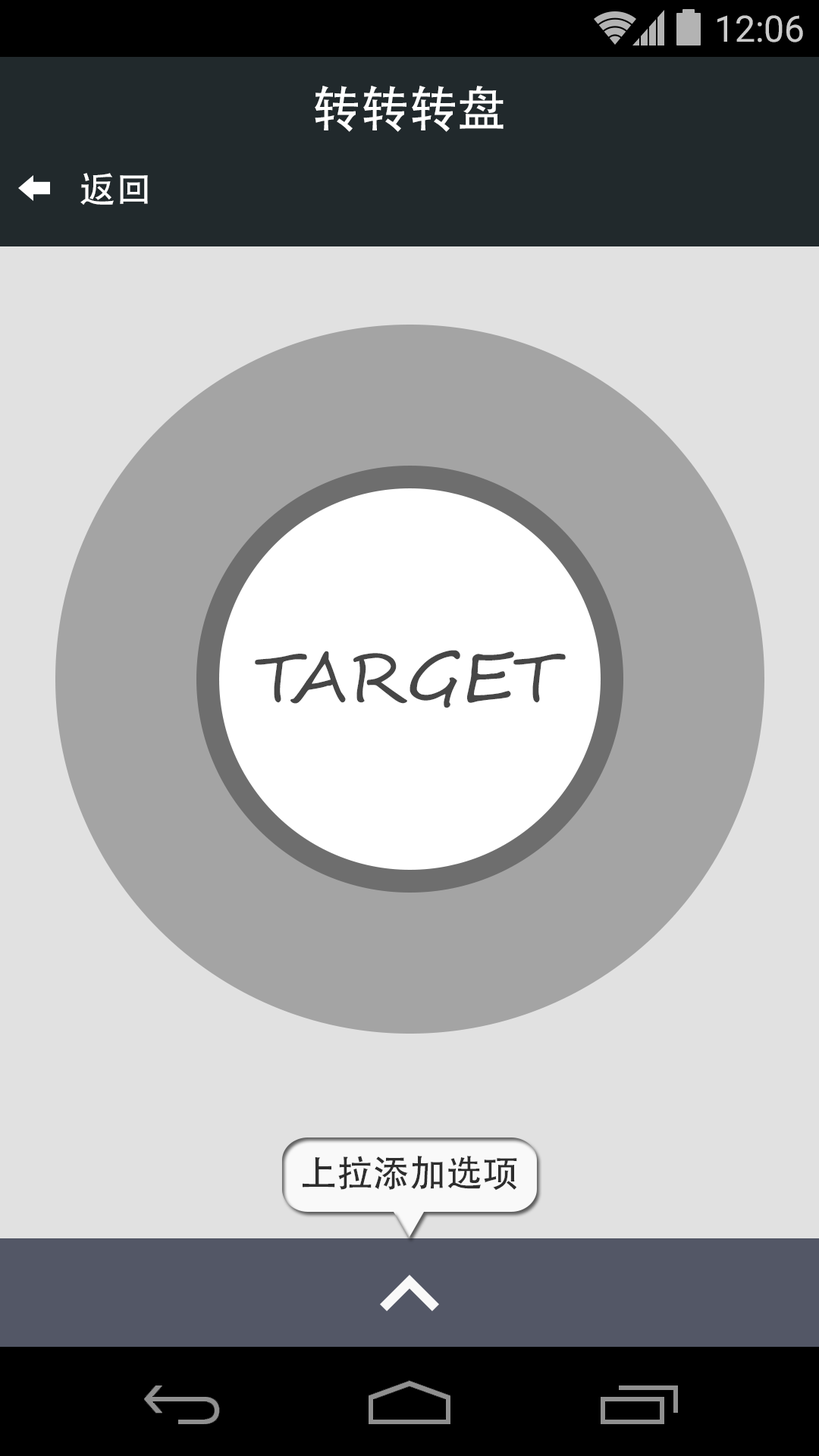
<style>
.page{position:relative;width:819px;height:1456px;background:#e1e1e1}
.page>*{position:absolute;margin:0}
.t1{font:36.4px "Roboto-Regular";color:#cbcbcb}
.t2{font:48.5px "AdobeHeitiStd-Regular";color:#ffffff}
.t3{font:36.4px "AdobeHeitiStd-Regular";color:#ffffff}
.t4{font:68.2px "SegoeScript";color:#464646}
.t5{font:36.4px "AdobeHeitiStd-Regular";color:#2d2d2d}
</style>
<div class="page">
<p class="t1" style="left:717px;top:15px;width:86px;height:27px">12:06</p>
<p class="t2" style="left:315px;top:86px;width:189px;height:46px">转转转盘</p>
<p class="t3" style="left:80px;top:173px;width:68px;height:32px">返回</p>
<p class="t4" style="left:255px;top:650px;width:311px;height:58px">TARGET</p>
<p class="t5" style="left:303px;top:1156px;width:214px;height:35px">上拉添加选项</p>
</div>
